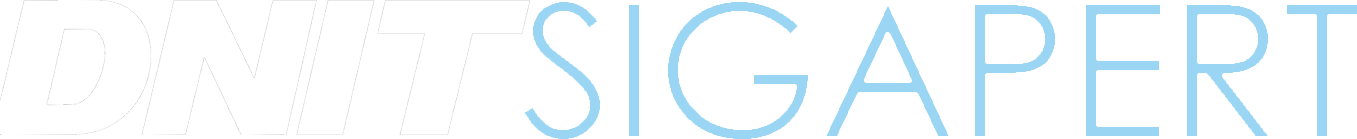
<style>
.page{position:relative;width:1357px;height:139px;background:#ffffff}
.page>*{position:absolute;margin:0}
.t1{font:187.5px "CenturyGothic";color:#9ad5f3}
</style>
<div class="page">
<p class="t1" style="left:522px;top:0px;width:837px;height:141px">SIGAPERT</p>
</div>
